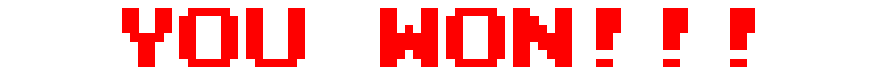
<style>
.page{position:relative;width:876px;height:84px;background:#ffffff}
.page>*{position:absolute;margin:0}
.t1{font:66.7px "Emulogic";color:#fe0000}
</style>
<div class="page">
<p class="t1" style="left:122px;top:8px;width:633px;height:59px">YOU WON!!!</p>
</div>
